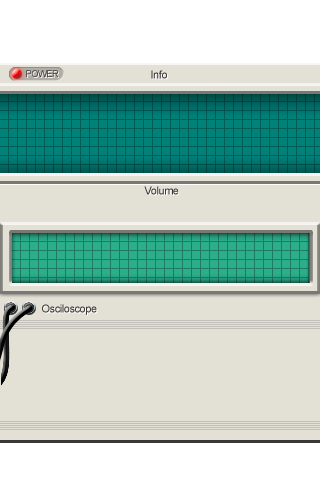
<style>
.page{position:relative;width:320px;height:480px;background:#e3e0d6}
.page>*{position:absolute;margin:0}
.t1{font:9.2px "ArialMT";letter-spacing:-0.04em;color:#393836}
.t2{font:11px "ArialMT";letter-spacing:-0.04em;color:#393836}
</style>
<div class="page">
<p class="t1" style="left:26px;top:70px;width:33px;height:7px">POWER</p>
<p class="t2" style="left:151px;top:70px;width:16px;height:9px">Info</p>
<p class="t2" style="left:144px;top:186px;width:35px;height:9px">Volume</p>
<p class="t2" style="left:42px;top:304px;width:55px;height:11px">Osciloscope</p>
</div>
